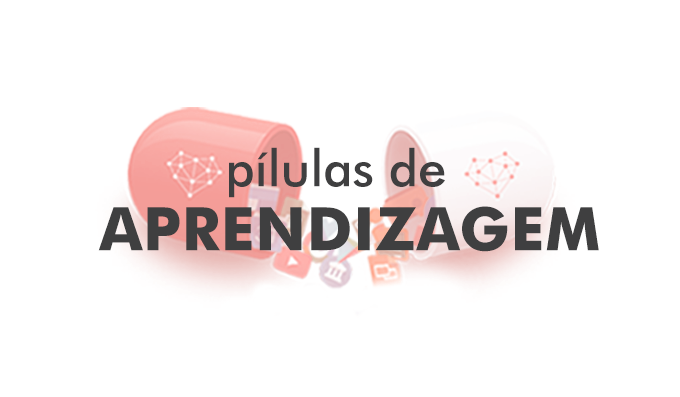
<style>
.page{position:relative;width:680px;height:397px;background:#ffffff}
.page>*{position:absolute;margin:0}
.t1{font:50.8px "FuturaBT-Medium";letter-spacing:-0.005em;color:#3f3f40}
.t2{font:60px "FuturaBT-Bold";letter-spacing:0.01em;color:#3f3f40}
</style>
<div class="page">
<p class="t1" style="left:229px;top:147px;width:216px;height:51px">pílulas de</p>
<p class="t2" style="left:98px;top:206px;width:501px;height:46px">APRENDIZAGEM</p>
</div>
